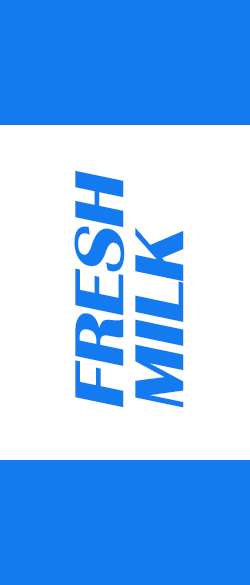
<style>
.page{position:relative;width:250px;height:585px;background:#137aef}
.page>*{position:absolute;margin:0}
.t1{font:72px/60px "BritannicBold";letter-spacing:-0.025em;color:#137aef;font-style:italic;scale:1.18 1}
</style>
<div class="page">
<p class="t1" style="left:74px;top:170px;width:110px;height:238px;rotate:-90deg">FRESH<br>MILK</p>
</div>
